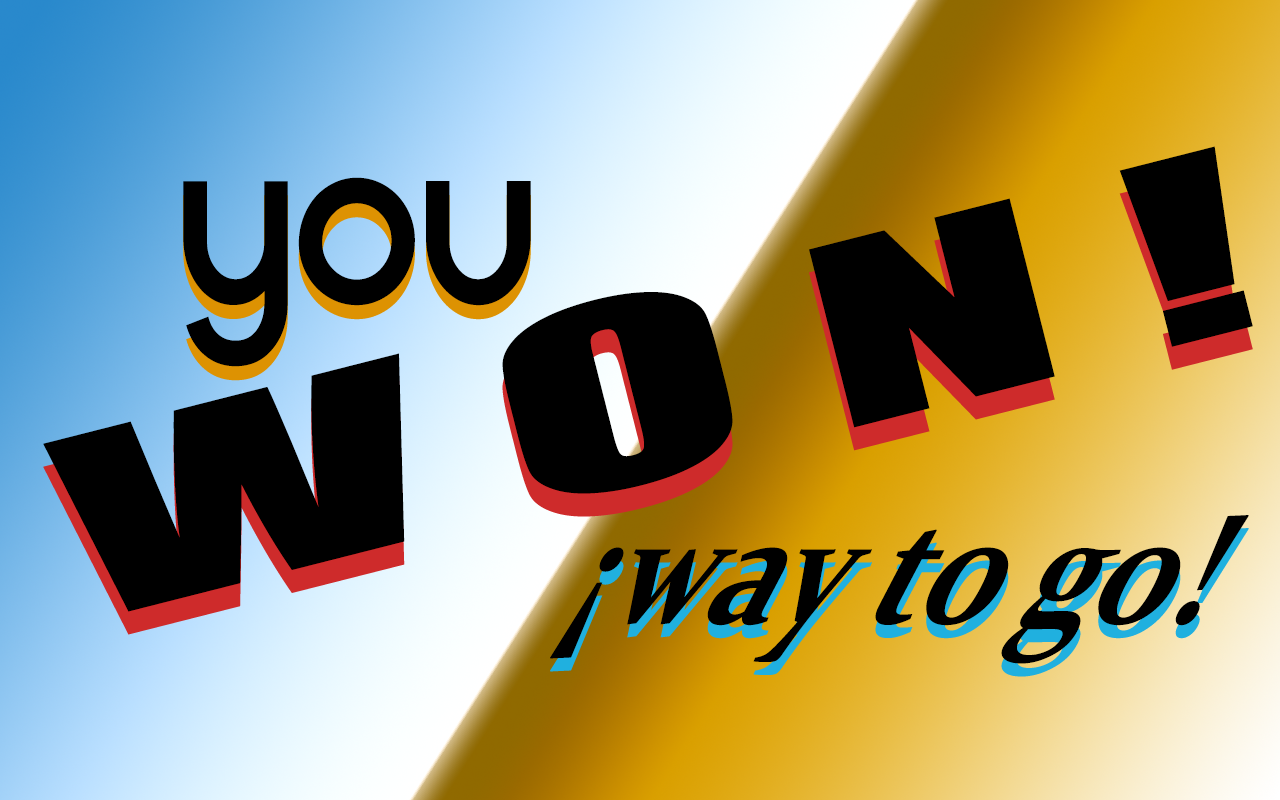
<style>
.page{position:relative;width:1280px;height:800px}
.page>*{position:absolute;margin:0}
.t1{font:231.9px "Impact";color:#000000;scale:1.94 1}
.t2{font:247.7px "Cirqua-Regular";color:#000000;scale:0.76 1}
.t3{font:181.4px "Constantia-Bold";color:#000000;scale:0.72 1}
</style>
<div class="page">
<p class="t1" style="left:43px;top:146px;width:1210px;height:466px;rotate:-14deg">W O N !</p>
<p class="t2" style="left:183px;top:177px;width:348px;height:190px">you</p>
<p class="t3" style="left:550px;top:515px;width:699px;height:149px">¡way to go!</p>
</div>
